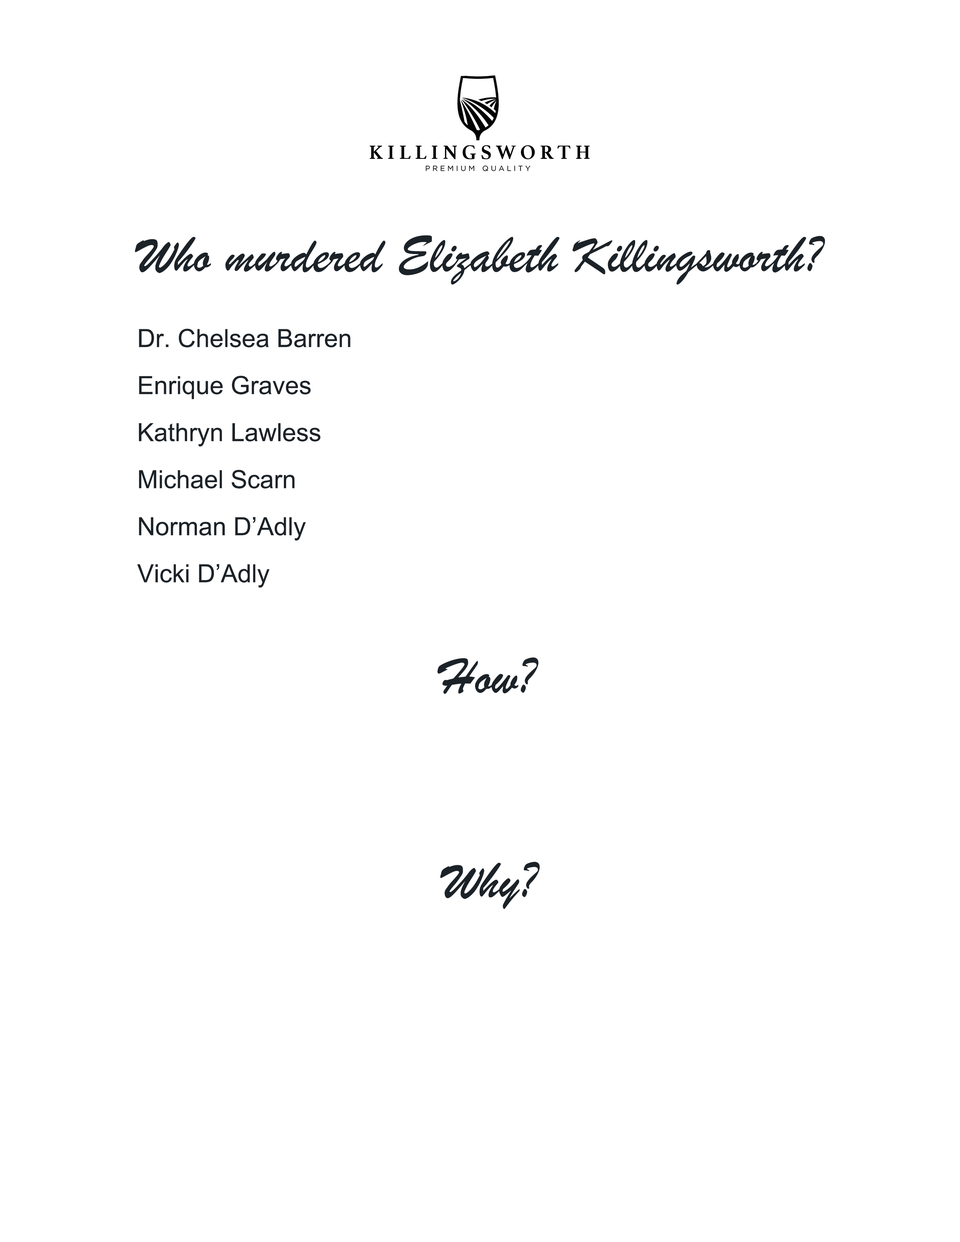
<style>
.page{position:relative;width:960px;height:1242px;background:#ffffff}
.page>*{position:absolute;margin:0}
.t1{font:53.3px "BrushScriptMT";color:#1b2228}
.t2{font:25.1px/47.1px "ArialMT";color:#1b2228}
</style>
<div class="page">
<p class="t1" style="left:135px;top:235px;width:690px;height:50px">Who murdered Elizabeth Killingsworth?</p>
<p class="t2" style="left:137px;top:329px;width:213px;height:259px">Dr. Chelsea Barren <br>Enrique Graves<br>Kathryn Lawless<br>Michael Scarn<br>Norman D’Adly<br>Vicki D’Adly</p>
<p class="t1" style="left:437px;top:657px;width:102px;height:37px">How?</p>
<p class="t1" style="left:440px;top:862px;width:100px;height:47px">Why?</p>
</div>
